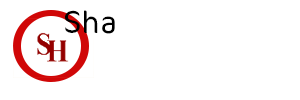
<style>
.page{position:relative;width:300px;height:100px;background:#ffffff}
.page>*{position:absolute;margin:0}
.t1{font:36px "CoconNextArabic-Light";color:#000000}
</style>
<div class="page">
<p class="t1" style="left:65px;top:10px;width:50px;height:24px">Sha</p>
</div>
